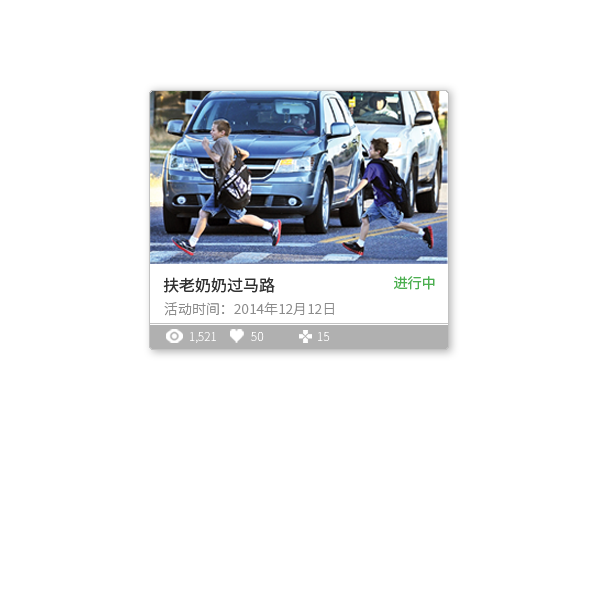
<style>
.page{position:relative;width:600px;height:600px;background:#ffffff}
.page>*{position:absolute;margin:0}
.t1{font:15.7px "NotoSansCJKsc-Regular";color:#313131}
.t2{font:13.7px "NotoSansCJKsc-Regular";color:#4caf50}
.t3{font:13.7px "NotoSansCJKsc-Light";color:#8b8b8b}
.t4{font:11.8px "NotoSansCJKsc-Thin";color:#ffffff}
</style>
<div class="page">
<p class="t1" style="left:163px;top:277px;width:112px;height:16px">扶老奶奶过马路</p>
<p class="t2" style="left:394px;top:276px;width:41px;height:14px">进行中</p>
<p class="t3" style="left:164px;top:302px;width:170px;height:14px">活动时间：2014年12月12日</p>
<p class="t4" style="left:190px;top:332px;width:26px;height:11px">1,521</p>
<p class="t4" style="left:251px;top:332px;width:13px;height:9px">50</p>
<p class="t4" style="left:318px;top:332px;width:12px;height:9px">15</p>
</div>
